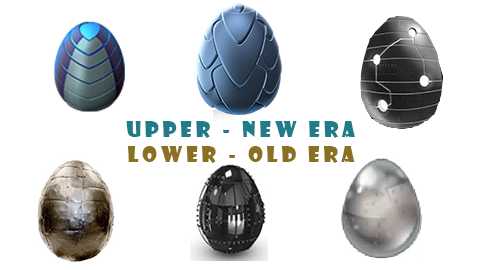
<style>
.page{position:relative;width:480px;height:270px;background:#ffffff}
.page>*{position:absolute;margin:0}
.t1{font:21px "ShowcardGothic-Reg";letter-spacing:0.18em;color:#217c89}
.t2{font:21px "ShowcardGothic-Reg";letter-spacing:0.18em;color:#8a7021}
</style>
<div class="page">
<p class="t1" style="left:126px;top:121px;width:229px;height:17px">Upper - new era</p>
<p class="t2" style="left:127px;top:146px;width:228px;height:17px">Lower - old era</p>
</div>
